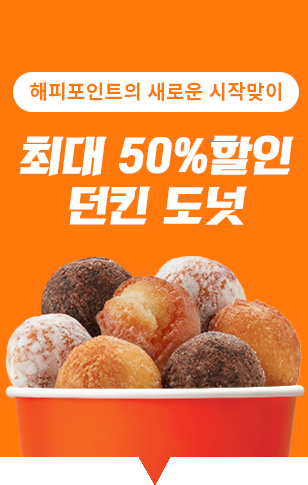
<style>
.page{position:relative;width:308px;height:485px;background:#ff780c}
.page>*{position:absolute;margin:0}
.t1{font:20px "NotoSansCJKkr-Bold";letter-spacing:0.02em;color:#ff780c}
.t2{font:41.6px "KoreanRKT-R";letter-spacing:0.02em;color:#ffffff}
</style>
<div class="page">
<p class="t1" style="left:30px;top:82px;width:251px;height:20px">해피포인트의 새로운 시작맞이</p>
<p class="t2" style="left:20px;top:135px;width:274px;height:90px;text-align:center">최대 50%할인<br>던킨 도넛</p>
</div>
